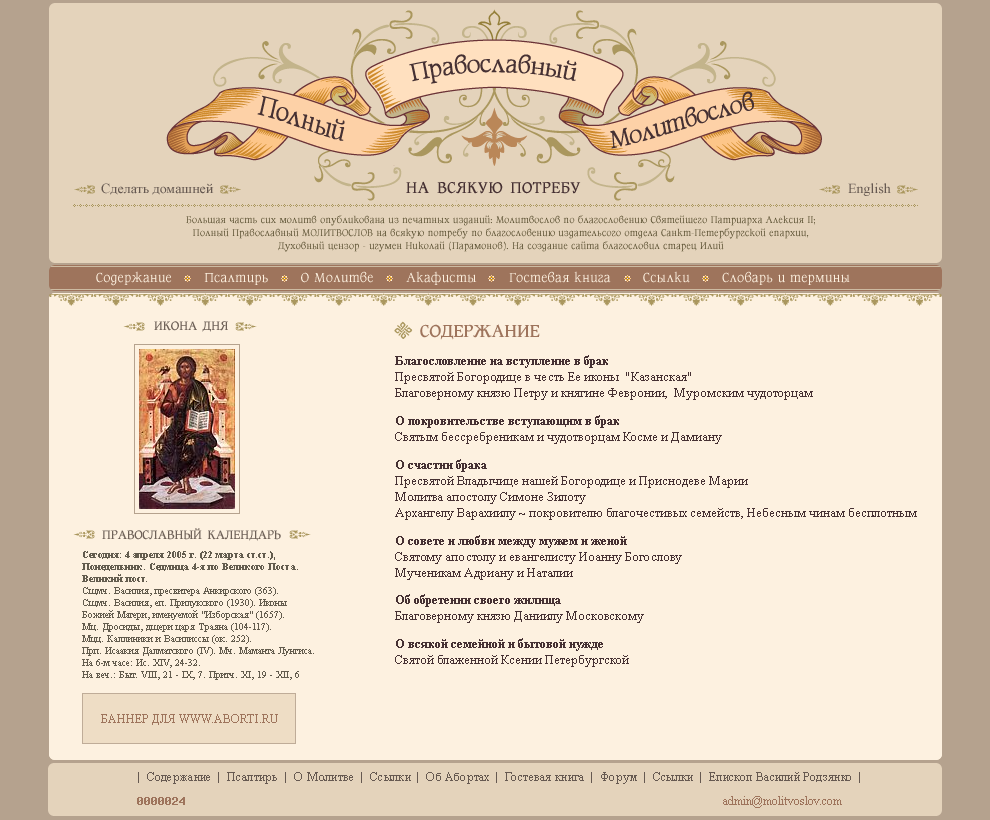
<style>
.page{position:relative;width:990px;height:820px;background:#fdf1e0}
.page>*{position:absolute;margin:0}
.t1{font:28px "Cotlin";color:#463133}
.t2{font:30px "Cotlin";letter-spacing:-0.02em;color:#463133}
.t3{font:28px "Cotlin";letter-spacing:-0.02em;color:#463133}
.t4{font:14px "TimesNewRomanPSMT";color:#665951}
.t5{font:18px "Cotlin-Bold";letter-spacing:0.02em;color:#463133}
.t6{font:11px/13px "Cotlin";letter-spacing:0.03em;color:#584e2f}
.t7{font:15px "Cotlin";letter-spacing:0.04em;color:#fdf1e0}
.t8{font:18px "OrnamentTM2";color:#aa975e}
.t9{font:14px "Cotlin-Bold";color:#6e6158}
.t10{font:36px "OrnamentTM2";color:#aa975e}
.t11{font:20px "Cotlin-Bold";color:#9e745c}
.t12{font:13px/16px "TimesNewRomanPSMT";color:#463133}
.t13{font:13px/16px "TimesNewRomanPS-BoldMT";color:#463133}
.t14{font:13px/12px "TimesNewRomanPS-BoldMT";color:#463133}
.t15{font:13px/11px "TimesNewRomanPS-BoldMT";color:#463133}
.t16{font:10px/12px "TimesNewRomanPSMT";color:#635c4e}
.t17{font:10px/12px "TimesNewRomanPS-BoldMT";color:#635c4e}
.t18{font:12px "TimesNewRomanPSMT";color:#9e745c}
.t19{font:12px "TimesNewRomanPSMT";letter-spacing:0.025em;color:#665951}
.t20{font:12px "TimesNewRomanPSMT";color:#705c57}
</style>
<div class="page">
<p class="t1" style="left:409px;top:54px;width:168px;height:30px">Православный</p>
<p class="t2" style="left:257px;top:95px;width:88px;height:46px;rotate:13deg">Полный</p>
<p class="t3" style="left:610px;top:91px;width:144px;height:58px;rotate:-11deg">Молитвослов</p>
<p class="t4" style="left:101px;top:183px;width:790px;height:13px">Сделать домашней                                  English</p>
<p class="t5" style="left:406px;top:181px;width:175px;height:13px">НА ВСЯКУЮ ПОТРЕБУ</p>
<p class="t6" style="left:186px;top:215px;width:629px;height:37px;text-align:center">Большая часть сих молитв опубликована из печатных изданий: Молитвослов по благословению Святейшего Патриарха Алексия II;<br>Полный Православный МОЛИТВОСЛОВ на всякую потребу по благословению издательсого отдела Санкт-Петербургской епархии,<br>Духовный цензор - игумен Николай (Парамонов). На создание сайта благословил старец Илий</p>
<p class="t7" style="left:96px;top:271px;width:754px;height:15px">Содержание       Псалтирь       О Молитве       Акафисты       Гостевая книга       Ссылки       Словарь и термины</p>
<p class="t8" style="left:49px;top:293px;width:893px;height:13px">VVVVVVVVVVVVVVVVVVVV</p>
<p class="t9" style="left:154px;top:321px;width:74px;height:11px">ИКОНА ДНЯ</p>
<p class="t10" style="left:394px;top:321px;width:19px;height:18px">p</p>
<p class="t11" style="left:420px;top:324px;width:120px;height:16px">СОДЕРЖАНИЕ</p>
<p class="t12" style="left:395px;top:355px;width:522px;height:312px"><span class="t13">Благословление на вступление в брак<br></span>Пресвятой Богородице в честь Ее иконы  "Казанская" <br>Благоверному князю Петру и княгине Февронии,  Муромским чудоторцам <br>   <br><span class="t14">О п</span><span class="t15">окр</span><span class="t13">овительстве вступающим в брак<br></span>Святым бессребреникам и чудотворцам Косме и Дамиану<br><br><span class="t14">О сча</span><span class="t15">ст</span><span class="t13">ии брака<br></span>Пресвятой Владычице нашей Богородице и Приснодеве Марии <br>Молитва апостолу Симонe Зилоту <br>Архангелу Варахиилу ~ покровителю благочестивых семейств, Небесным чинам бесплотным<br> <br><span class="t14">О сов</span><span class="t15">ете и л</span><span class="t13">юбви между мужем и женой<br></span>Святому апостолу и евангелисту Иоанну Богослову <br>Мученикам Адриану и Наталии<br> <br><span class="t14">Об обр</span><span class="t15">етени</span><span class="t13">и своего жилища<br></span>Благоверному князю Даниилу Московскому <br><br><span class="t14">О вс</span><span class="t15">якой се</span><span class="t13">мейной и бытовой нужде<br></span>Святой блаженной Ксении Петербургской</p>
<p class="t9" style="left:102px;top:528px;width:179px;height:13px">ПРАВОСЛАВНЫЙ КАЛЕНДАРЬ</p>
<p class="t16" style="left:82px;top:551px;width:232px;height:129px"><span class="t17">Сегодня: 4 апреля 2005 г. (22 марта ст.ст.),<br>Понедельник. Седмица 4-я по Великого Поста.<br>Великий пост.</span> <br>Сщмч. Василия, пресвитера Анкирского (363).<br>Сщмч. Василия, еп. Прилукского (1930). Иконы<br>Божией Матери, именуемой "Изборская" (1657). <br>Мц. Дросиды, дщери царя Траяна (104-117).<br>Мцц. Каллиники и Василиссы (ок. 252).<br>Прп. Исаакия Далматского (IV). Мч. Маманта Лунгиса. <br>На 6-м часе: Ис. XIV, 24-32. <br>На веч.: Быт. VIII, 21 - IX, 7. Притч. XI, 19 - XII, 6</p>
<p class="t18" style="left:101px;top:714px;width:177px;height:11px">БАННЕР ДЛЯ WWW.ABORTI.RU</p>
<p class="t19" style="left:138px;top:772px;width:722px;height:12px">|  Содержание  |  Псалтирь  |  О Молитве  |  Ссылки  |  Об Абортах  |  Гостевая книга  |  Форум  |  Ссылки  |  Епископ Василий Родзянко  |</p>
<p class="t18" style="left:723px;top:796px;width:119px;height:12px"><span class="t20"> </span>admin@molitvoslov.com</p>
</div>
